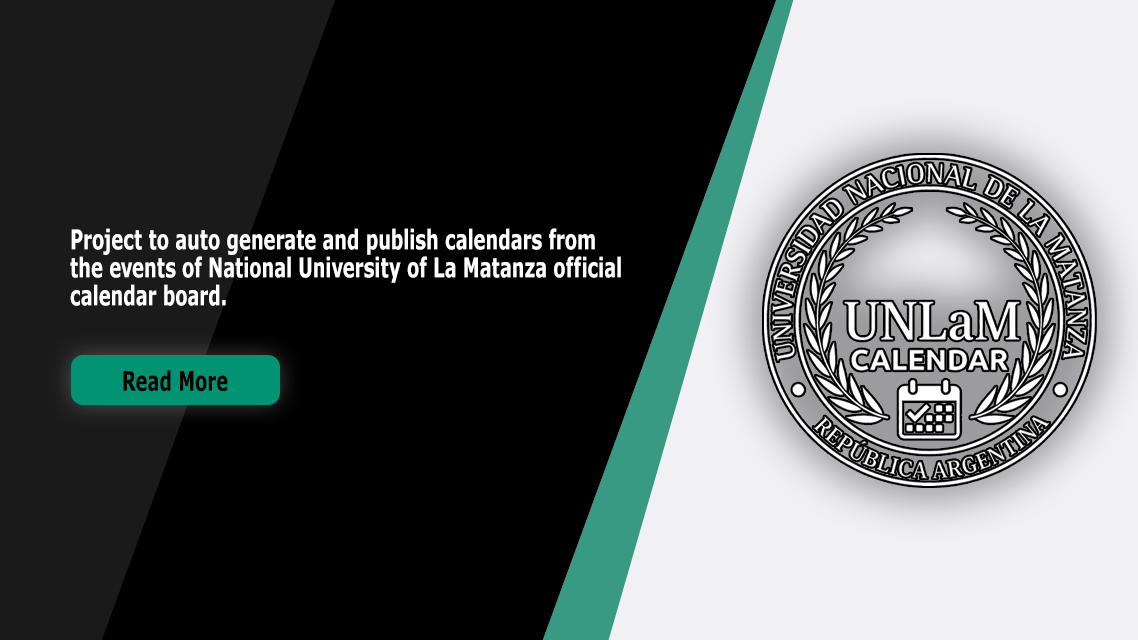
<style>
.page{position:relative;width:1138px;height:640px;background:#000000}
.page>*{position:absolute;margin:0}
.t1{font:27px/28px "Verdana-Bold";color:#ffffff;scale:0.67 1}
.t2{font:27px "Verdana-Bold";color:#000000;scale:0.67 1}
</style>
<div class="page">
<p class="t1" style="left:70px;top:228px;width:551px;height:78px">Project to auto generate and publish calendars from the events of National University of La Matanza official calendar board.</p>
<p class="t2" style="left:123px;top:370px;width:105px;height:22px">Read More</p>
</div>
